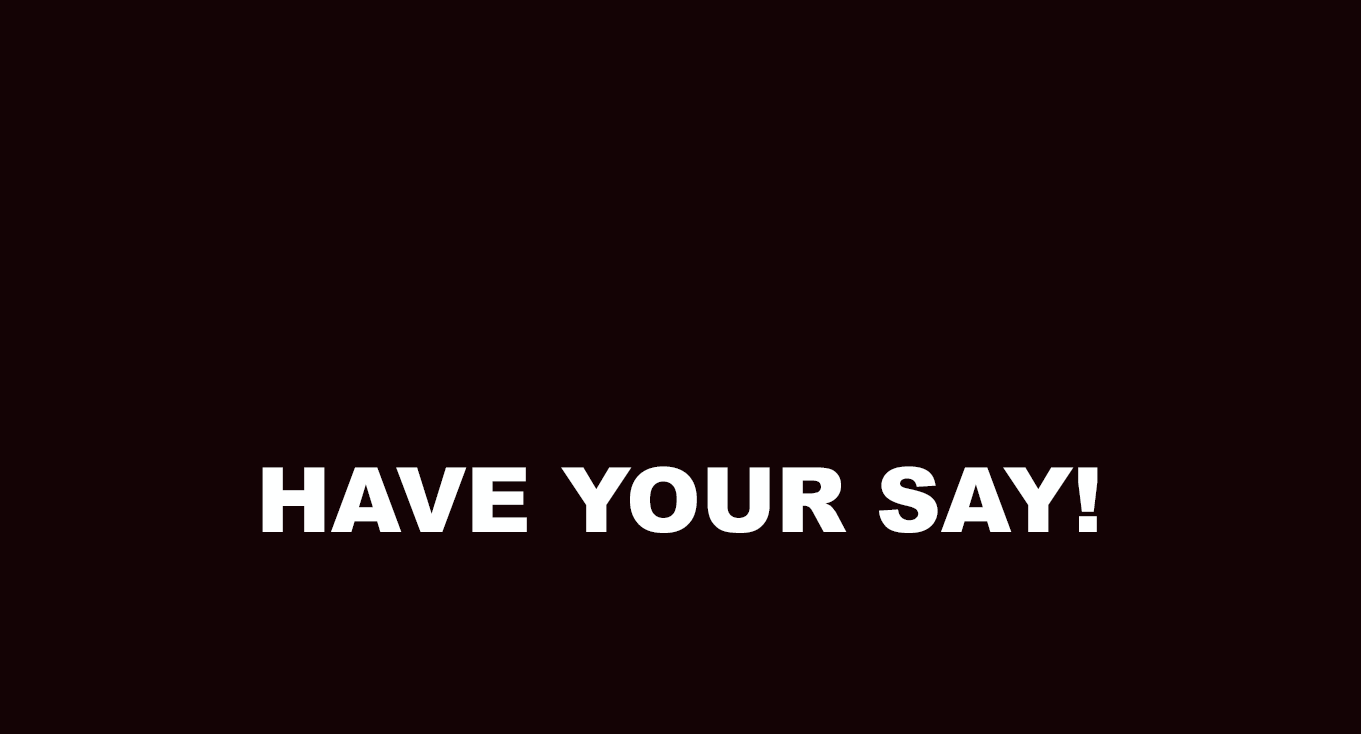
<style>
.page{position:relative;width:1361px;height:734px;background:#140305}
.page>*{position:absolute;margin:0}
.t1{font:90px "Arial-Black";color:#feffff}
</style>
<div class="page">
<p class="t1" style="left:262px;top:466px;width:836px;height:67px">HAVE YOUR SAY!</p>
</div>
